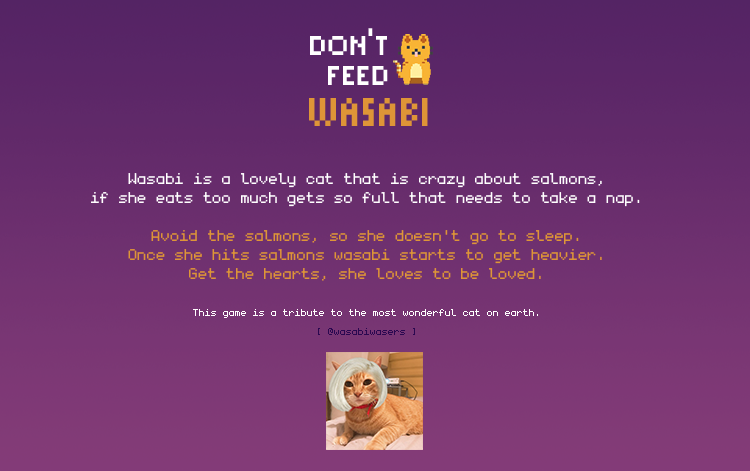
<style>
.page{position:relative;width:750px;height:471px}
.page>*{position:absolute;margin:0}
.t1{font:29.4px/30.3px "PixelSix02";color:#ffffff}
.t2{font:43.2px "PixelSix14";color:#de9537;text-transform:uppercase}
.t3{font:25px/18.9px "monogramextended";color:#de9537}
.t4{font:21.4px/18.9px "monogramextended";color:#ffffff}
.t5{font:25px/18.9px "monogramextended";color:#ffffff}
.t6{font:16px/18.9px "monogramextended";color:#ffffff}
.t7{font:16px/18.9px "monogramextended";color:#2a0850}
</style>
<div class="page">
<p class="t1" style="left:310px;top:28px;width:78px;height:57px;text-align:right">don't<br>feed</p>
<p class="t2" style="left:309px;top:98px;width:119px;height:28px">wasabi</p>
<p class="t3" style="left:91px;top:173px;width:549px;height:162px;text-align:center"><span class="t4"><br><br></span><span class="t5">Wasabi is a lovely cat that is crazy about salmons, <br>if she eats too much gets so full that needs to take a nap. <br><br></span>Avoid the salmons, so she doesn't go to sleep.<br>Once she hits salmons wasabi starts to get heavier.<br>Get the hearts, she loves to be loved.<br><br><span class="t6">This game is a tribute to the most wonderful cat on earth.<br></span><span class="t7">[ @wasabiwasers ]</span></p>
</div>
